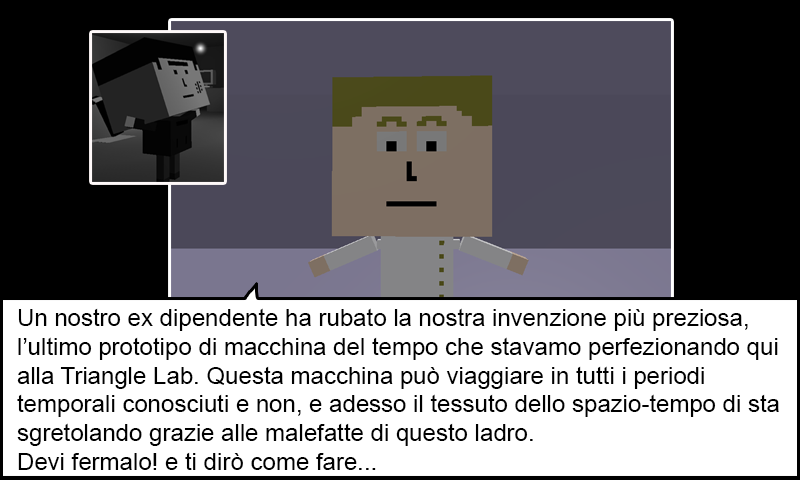
<style>
.page{position:relative;width:800px;height:480px;background:#ffffff}
.page>*{position:absolute;margin:0}
.t1{font:24px "ArialMT";color:#000000}
</style>
<div class="page">
<p class="t1" style="left:17px;top:308px;width:762px;height:162px">Un nostro ex dipendente ha rubato la nostra invenzione più preziosa,<br>l’ultimo prototipo di macchina del tempo che stavamo perfezionando qui<br>alla Triangle Lab. Questa macchina può viaggiare in tutti i periodi<br>temporali conosciuti e non, e adesso il tessuto dello spazio-tempo di sta<br>sgretolando grazie alle malefatte di questo ladro.<br>Devi fermalo! e ti dirò come fare...</p>
</div>
